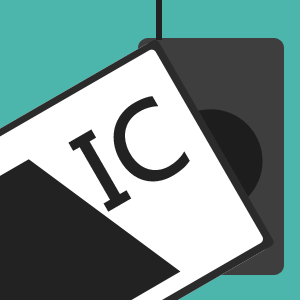
<style>
.page{position:relative;width:300px;height:300px;background:#ffffff}
.page>*{position:absolute;margin:0}
.t1{font:105.5px "YuGothic-Bold";color:#222222}
</style>
<div class="page">
<p class="t1" style="left:68px;top:96px;width:122px;height:116px;rotate:-30deg">IC</p>
</div>
